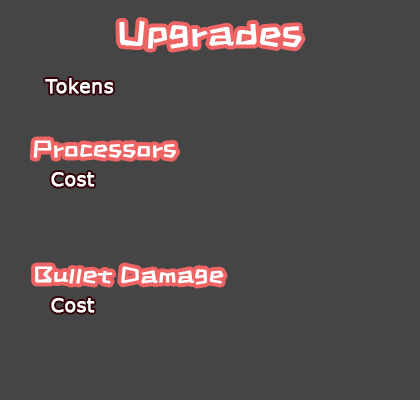
<style>
.page{position:relative;width:420px;height:400px;background:#454545}
.page>*{position:absolute;margin:0}
.t1{font:35.1px "ZCOOLKuaiLe-Regular";color:#ffffff;font-weight:bold;scale:1.09 1}
.t2{font:19px "Verdana";color:#ffffff;font-weight:bold}
.t3{font:23.1px "ZCOOLKuaiLe-Regular";color:#ffffff;font-weight:bold;scale:1.09 1}
</style>
<div class="page">
<p class="t1" style="left:119px;top:21px;width:183px;height:28px">Upgrades</p>
<p class="t2" style="left:45px;top:78px;width:69px;height:16px">Tokens</p>
<p class="t3" style="left:33px;top:140px;width:144px;height:18px">Processors</p>
<p class="t2" style="left:51px;top:172px;width:44px;height:15px">Cost</p>
<p class="t3" style="left:35px;top:266px;width:189px;height:19px">Bullet Damage</p>
<p class="t2" style="left:51px;top:298px;width:44px;height:15px">Cost</p>
</div>
